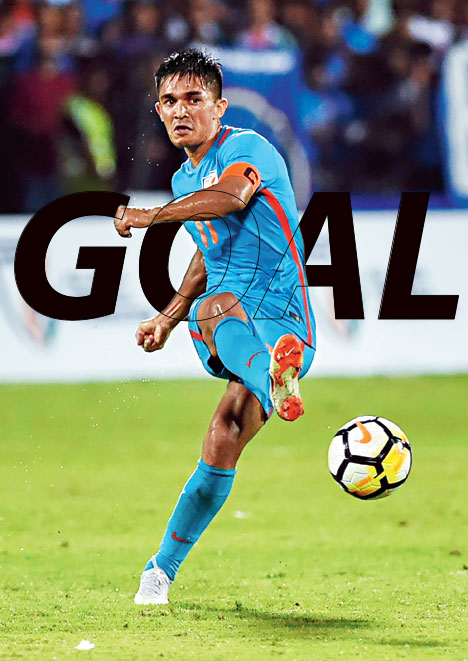
<style>
.page{position:relative;width:468px;height:661px}
.page>*{position:absolute;margin:0}
.t1{font:187.5px "MyriadPro-BoldIt";color:#130101}
</style>
<div class="page">
<p class="t1" style="left:15px;top:191px;width:444px;height:130px">GOAL</p>
</div>
